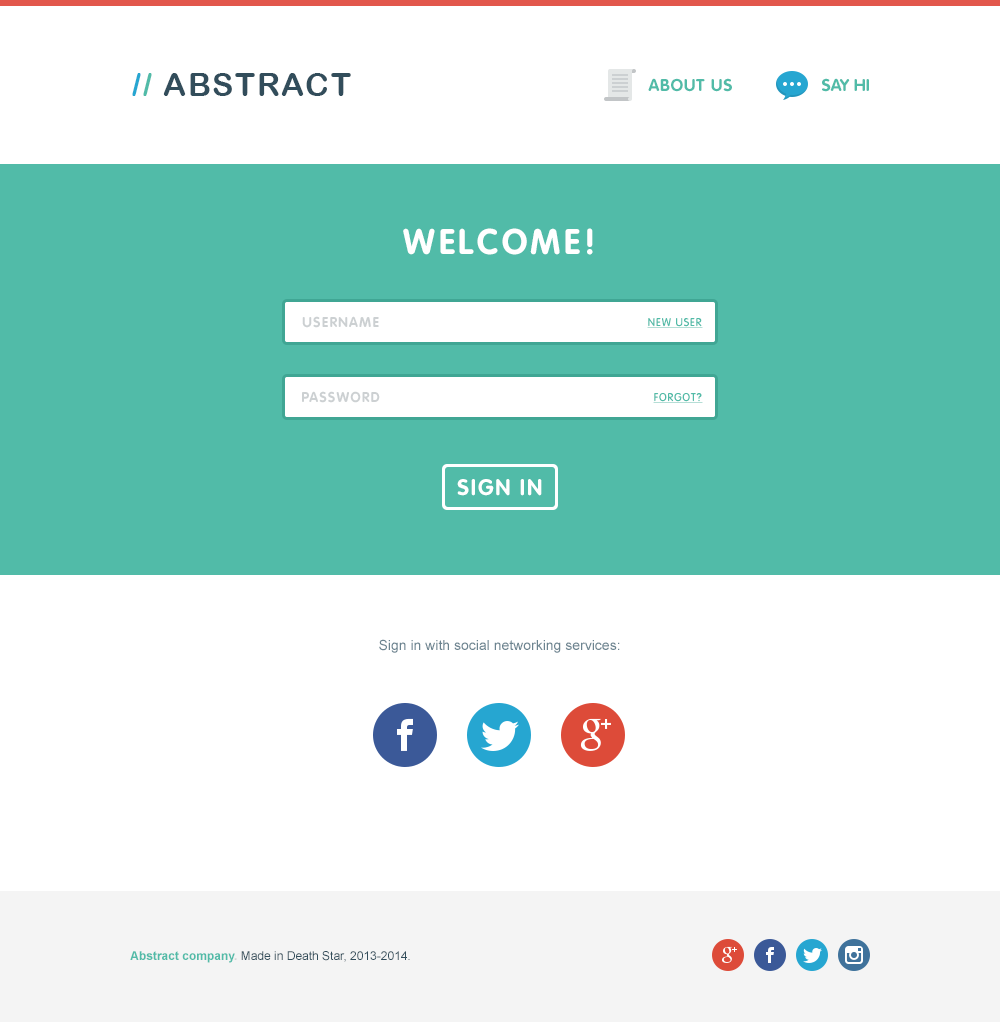
<style>
.page{position:relative;width:1000px;height:1022px;background:#ffffff}
.page>*{position:absolute;margin:0}
.t1{font:32px "ArialRoundedMTBold";letter-spacing:0.05em;color:#324d5b;text-transform:uppercase}
.t2{font:32px "ArialRoundedMTBold";letter-spacing:0.05em;color:#26a6d1;text-transform:uppercase}
.t3{font:32px "ArialRoundedMTBold";letter-spacing:0.05em;color:#51bba8;text-transform:uppercase}
.t4{font:17px "RotondaC-Bold";letter-spacing:0.05em;color:#51bba8;text-transform:uppercase}
.t5{font:17px "RotondaC-Bold";color:#51bba8;text-transform:uppercase}
.t6{font:35px "RotondaC-Bold";letter-spacing:0.1em;color:#ffffff;text-transform:uppercase}
.t7{font:14px "RotondaC-Bold";letter-spacing:0.083em;color:#ccd0d2;text-transform:uppercase}
.t8{font:11px "RotondaC";letter-spacing:0.083em;color:#51bba8;text-transform:uppercase;text-decoration:underline}
.t9{font:22px "RotondaC-Bold";letter-spacing:0.083em;color:#ffffff;text-transform:uppercase}
.t10{font:14px "ArialMT";color:#6c8490}
.t11{font:12px "ArialMT";color:#324d5b}
.t12{font:12px "Arial-BoldMT";color:#51bba8}
.t13{font:12px "Arial-BoldMT";color:#d3d3d3}
</style>
<div class="page">
<p class="t1" style="left:132px;top:73px;width:219px;height:23px"><span class="t2">/</span><span class="t3">/ </span>Abstract</p>
<p class="t4" style="left:648px;top:78px;width:84px;height:14px">About us</p>
<p class="t5" style="left:822px;top:78px;width:47px;height:14px">Say hi</p>
<p class="t6" style="left:403px;top:228px;width:190px;height:27px">WELCOME!</p>
<p class="t7" style="left:302px;top:316px;width:77px;height:12px">USERNAME</p>
<p class="t8" style="left:647px;top:318px;width:56px;height:10px">New user</p>
<p class="t7" style="left:302px;top:391px;width:78px;height:12px">PASSWORD</p>
<p class="t8" style="left:653px;top:393px;width:50px;height:10px">Forgot?</p>
<p class="t9" style="left:457px;top:479px;width:85px;height:17px">SIGN IN</p>
<p class="t10" style="left:379px;top:639px;width:241px;height:14px">Sign in with social networking services:</p>
<p class="t11" style="left:130px;top:951px;width:280px;height:12px"><span class="t12">Abstract company</span><span class="t13">. </span>Made in Death Star, 2013-2014.</p>
</div>
